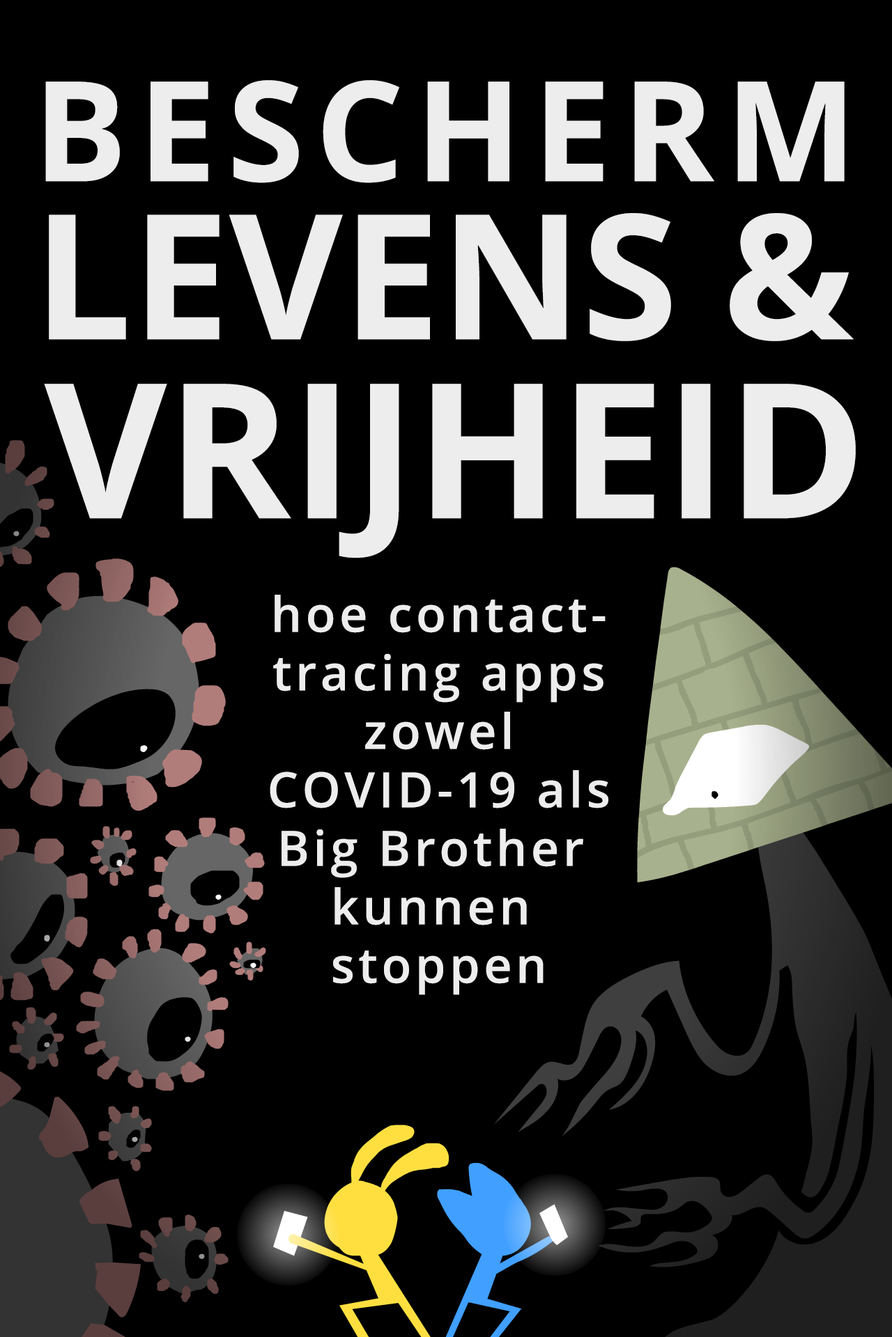
<style>
.page{position:relative;width:892px;height:1337px;background:#000000}
.page>*{position:absolute;margin:0}
.t1{font:139.3px "OpenSans-Bold";letter-spacing:0.08em;color:#ededed}
.t2{font:174.1px "OpenSans-Bold";color:#ededed}
.t3{font:188.1px "OpenSans-Bold";color:#ededed}
.t4{font:48.8px "OpenSans-SemiBold";letter-spacing:0.08em;color:#ededed}
</style>
<div class="page">
<p class="t1" style="left:45px;top:80px;width:799px;height:103px">BESCHERM</p>
<p class="t2" style="left:49px;top:213px;width:804px;height:128px">LEVENS &amp;</p>
<p class="t3" style="left:44px;top:384px;width:811px;height:174px">VRIJHEID</p>
<p class="t4" style="left:270px;top:595px;width:338px;height:400px;text-align:center">hoe contact-<br>tracing apps<br>zowel<br>COVID-19 als<br>Big Brother <br>kunnen <br>stoppen</p>
</div>
